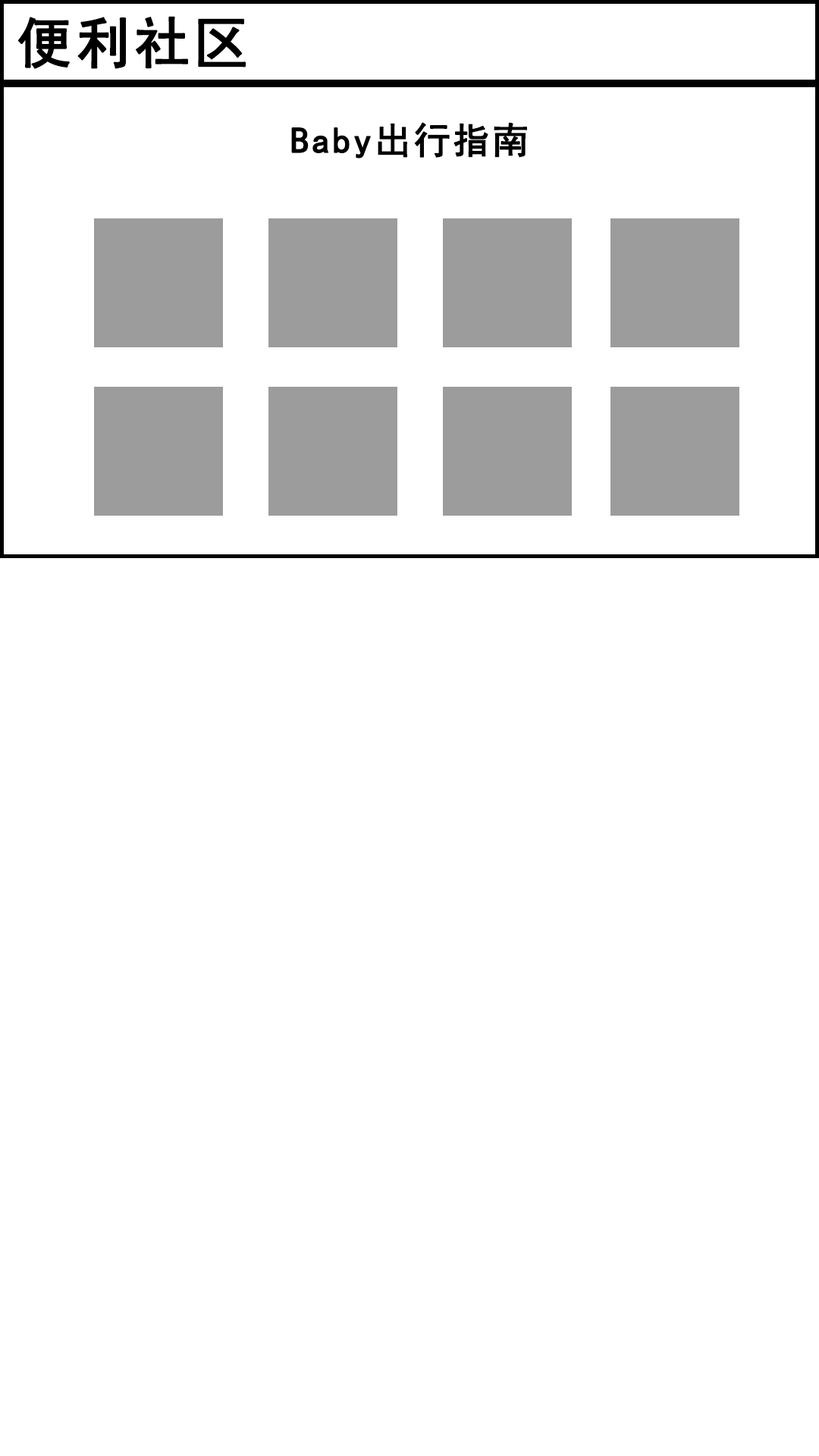
<style>
.page{position:relative;width:819px;height:1456px;background:#ffffff}
.page>*{position:absolute;margin:0}
.t1{font:54.6px "SimHei";letter-spacing:0.05em;color:#000000;font-weight:bold}
.t2{font:36.4px "SimHei";letter-spacing:0.05em;color:#000000;font-weight:bold}
</style>
<div class="page">
<p class="t1" style="left:18px;top:16px;width:228px;height:53px">便利社区</p>
<p class="t2" style="left:291px;top:122px;width:236px;height:36px">Baby出行指南</p>
</div>
